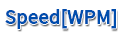
<style>
.page{position:relative;width:120px;height:35px;background:#ffffff}
.page>*{position:absolute;margin:0}
.t1{font:21.2px "Pyidaungsu-Bold";color:#004dad}
</style>
<div class="page">
<p class="t1" style="left:5px;top:9px;width:111px;height:20px">Speed[WPM]</p>
</div>
